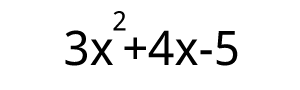
<style>
.page{position:relative;width:300px;height:90px;background:#ffffff}
.page>*{position:absolute;margin:0}
.t1{font:27px "DroidSans";color:#000000}
.t2{font:47.6px "DroidSans";color:#000000}
</style>
<div class="page">
<p class="t1" style="left:113px;top:11px;width:13px;height:20px">2</p>
<p class="t2" style="left:65px;top:30px;width:48px;height:36px">3x</p>
<p class="t2" style="left:124px;top:30px;width:114px;height:36px">+4x-5</p>
</div>
